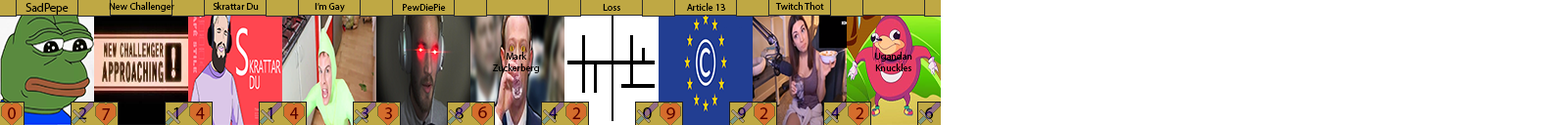
<style>
.page{position:relative;width:1568px;height:125px;background:#ffffff}
.page>*{position:absolute;margin:0}
.t1{font:11.8px "MyriadPro-Regular";color:#000000}
.t2{font:9.8px "MyriadPro-Regular";color:#000000}
.t3{font:17.6px "MyriadPro-Regular";color:#590000}
.t4{font:17.6px "MyriadPro-Regular"}
</style>
<div class="page">
<p class="t1" style="left:25px;top:3px;width:44px;height:12px">SadPepe</p>
<p class="t2" style="left:109px;top:2px;width:65px;height:10px">New Challenger</p>
<p class="t2" style="left:213px;top:2px;width:46px;height:8px">Skrattar Du</p>
<p class="t2" style="left:315px;top:3px;width:30px;height:10px">I’m Gay</p>
<p class="t2" style="left:403px;top:4px;width:43px;height:7px">PewDiePie</p>
<p class="t2" style="left:603px;top:4px;width:17px;height:7px">Loss</p>
<p class="t2" style="left:687px;top:3px;width:38px;height:8px">Article 13</p>
<p class="t2" style="left:775px;top:2px;width:49px;height:8px">Twitch Thot</p>
<p class="t2" style="left:492px;top:52px;width:47px;height:22px;text-align:center">Mark<br>Zuckerberg</p>
<p class="t2" style="left:875px;top:52px;width:37px;height:20px;text-align:center">Ugandan Knuckles</p>
<p class="t3" style="left:8px;top:108px;width:8px;height:12px">0</p>
<p class="t4" style="left:78px;top:108px;width:9px;height:12px">2</p>
<p class="t3" style="left:102px;top:109px;width:8px;height:12px">7</p>
<p class="t4" style="left:173px;top:108px;width:5px;height:12px">1</p>
<p class="t3" style="left:196px;top:108px;width:9px;height:12px">4</p>
<p class="t4" style="left:268px;top:108px;width:4px;height:12px">1</p>
<p class="t3" style="left:290px;top:108px;width:9px;height:12px">4</p>
<p class="t4" style="left:361px;top:108px;width:7px;height:12px">3</p>
<p class="t3" style="left:384px;top:108px;width:8px;height:12px">3</p>
<p class="t4" style="left:455px;top:108px;width:9px;height:12px">8</p>
<p class="t3" style="left:478px;top:107px;width:9px;height:12px">6</p>
<p class="t4" style="left:549px;top:108px;width:9px;height:12px">4</p>
<p class="t3" style="left:572px;top:108px;width:9px;height:12px">2</p>
<p class="t4" style="left:643px;top:108px;width:9px;height:12px">0</p>
<p class="t3" style="left:666px;top:108px;width:9px;height:12px">9</p>
<p class="t4" style="left:738px;top:108px;width:8px;height:12px">9</p>
<p class="t3" style="left:760px;top:108px;width:8px;height:12px">2</p>
<p class="t4" style="left:831px;top:108px;width:9px;height:12px">4</p>
<p class="t3" style="left:856px;top:108px;width:8px;height:12px">2</p>
<p class="t4" style="left:925px;top:108px;width:8px;height:12px">6</p>
</div>
